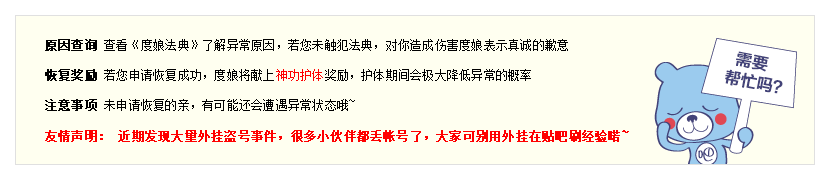
<style>
.page{position:relative;width:830px;height:180px;background:#fffff0}
.page>*{position:absolute;margin:0}
.t1{font:12px/30px "SimSun";letter-spacing:0.02em;color:#000000}
.t2{font:12px/30px "SimSun";letter-spacing:0.02em;color:#000000;font-weight:bold}
.t3{font:12px/30px "SimSun";letter-spacing:0.02em;color:#fe0000}
.t4{font:12px "SimSun";letter-spacing:0.02em;color:#fe0000;font-weight:bold}
</style>
<div class="page">
<p class="t1" style="left:45px;top:39px;width:523px;height:72px;text-align:justify"><span class="t2">原因查询</span> 查看《度娘法典》了解异常原因，若您未触犯法典，对你造成伤害度娘表示真诚的歉意<br><span class="t2">恢复奖励</span> 若您申请恢复成功，度娘将献上<span class="t3">神功护体</span>奖励，护体期间会极大降低异常的概率<br><span class="t2">注意事项</span> 未申请恢复的亲，有可能还会遭遇异常状态哦~</p>
<p class="t4" style="left:45px;top:130px;width:584px;height:12px">友情声明： 近期发现大量外挂盗号事件，很多小伙伴都丢帐号了，大家可别用外挂在贴吧刷经验喏~</p>
</div>
